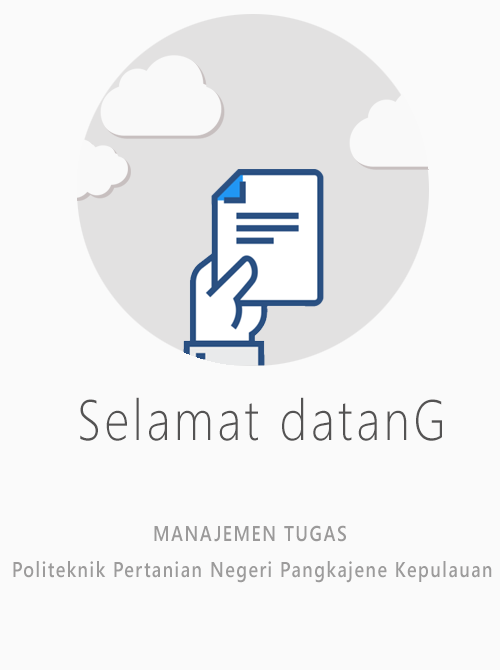
<style>
.page{position:relative;width:500px;height:670px;background:#fafafa}
.page>*{position:absolute;margin:0}
.t1{font:57.1px "SegoeUI-Light";letter-spacing:0.08em;color:#545353;scale:0.84 1}
.t2{font:21.4px "SegoeUI-Semibold";letter-spacing:0.08em;color:#9b9a9a;scale:0.84 1}
.t3{font:21.4px "SegoeUI-Semibold";letter-spacing:0.08em;color:#9c9b9b;scale:0.84 1}
</style>
<div class="page">
<p class="t1" style="left:80px;top:397px;width:362px;height:44px">Selamat datanG</p>
<p class="t2" style="left:154px;top:525px;width:192px;height:17px">MANAJEMEN TUGAS</p>
<p class="t3" style="left:13px;top:561px;width:479px;height:22px">Politeknik Pertanian Negeri Pangkajene Kepulauan</p>
</div>
